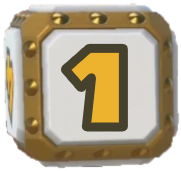
<style>
.page{position:relative;width:181px;height:171px}
.page>*{position:absolute;margin:0}
.t1{font:140px "MarioPartyHudson-Regular";color:#eeb32e}
</style>
<div class="page">
<p class="t1" style="left:65px;top:48px;width:59px;height:79px">1</p>
</div>
